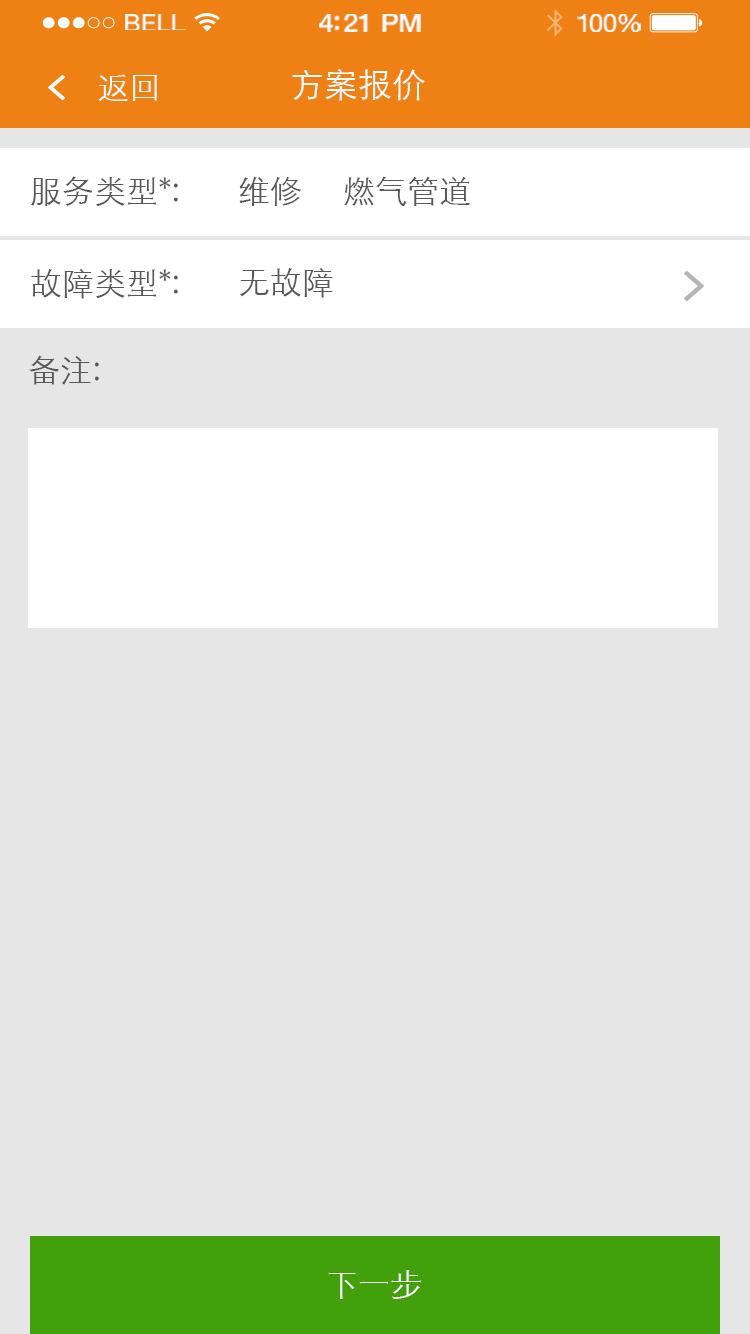
<style>
.page{position:relative;width:750px;height:1334px;background:#e6e6e6}
.page>*{position:absolute;margin:0}
.t1{font:23.3px "HelveticaNeue";letter-spacing:0.02em;color:#ffffff;scale:1.06 1}
.t2{font:25.3px "HelveticaNeue-Medium";letter-spacing:-0.02em;color:#ffffff;scale:1.06 1}
.t3{font:24.3px "HelveticaNeue";letter-spacing:-0.02em;color:#ffffff;scale:1.06 1}
.t4{font:32px "STXihei";color:#ffffff}
.t5{font:34px "STXihei";color:#ffffff}
.t6{font:32px "STXihei";color:#595757}
</style>
<div class="page">
<p class="t1" style="left:125px;top:14px;width:61px;height:16px">BELL</p>
<p class="t2" style="left:319px;top:14px;width:102px;height:18px">4:21 PM</p>
<p class="t3" style="left:577px;top:14px;width:64px;height:18px">100%</p>
<p class="t4" style="left:98px;top:74px;width:59px;height:27px">返回</p>
<p class="t5" style="left:292px;top:69px;width:133px;height:32px">方案报价</p>
<p class="t6" style="left:31px;top:176px;width:147px;height:31px">服务类型*:</p>
<p class="t6" style="left:239px;top:176px;width:62px;height:30px">维修</p>
<p class="t6" style="left:344px;top:176px;width:126px;height:30px">燃气管道</p>
<p class="t6" style="left:31px;top:269px;width:147px;height:30px">故障类型*:</p>
<p class="t6" style="left:239px;top:268px;width:94px;height:30px">无故障</p>
<p class="t6" style="left:29px;top:355px;width:70px;height:30px">备注:</p>
<p class="t4" style="left:328px;top:1270px;width:93px;height:29px">下一步</p>
</div>
